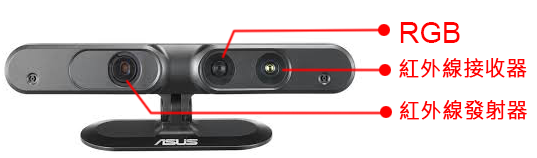
<style>
.page{position:relative;width:537px;height:158px;background:#ffffff}
.page>*{position:absolute;margin:0}
.t1{font:29px "ArialMT";color:#ff0000}
.t2{font:21px "MicrosoftJhengHeiRegular";color:#ff0000;font-weight:bold}
</style>
<div class="page">
<p class="t1" style="left:400px;top:22px;width:60px;height:21px">RGB</p>
<p class="t2" style="left:399px;top:58px;width:128px;height:20px">紅外線接收器</p>
<p class="t2" style="left:399px;top:100px;width:128px;height:20px">紅外線發射器</p>
</div>
